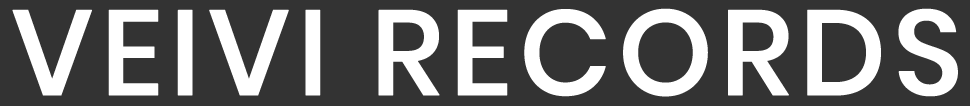
<style>
.page{position:relative;width:970px;height:106px;background:#333333}
.page>*{position:absolute;margin:0}
.t1{font:120px "Poppins-Medium";letter-spacing:0.035em;color:#ffffff;text-transform:uppercase;font-weight:bold}
</style>
<div class="page">
<p class="t1" style="left:12px;top:8px;width:946px;height:89px">veivi records</p>
</div>
